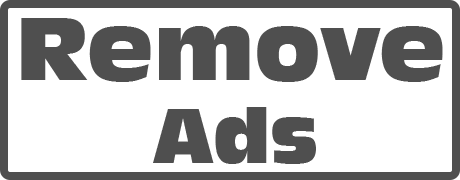
<style>
.page{position:relative;width:460px;height:180px;background:#ffffff}
.page>*{position:absolute;margin:0}
.t1{font:86.8px "AntiqueOlive-Compact";color:#4f4f4f}
.t2{font:74.7px "AntiqueOlive-Compact";color:#4f4f4f}
</style>
<div class="page">
<p class="t1" style="left:21px;top:18px;width:422px;height:64px">Remove</p>
<p class="t2" style="left:153px;top:107px;width:163px;height:57px">Ads</p>
</div>
